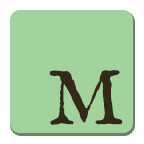
<style>
.page{position:relative;width:144px;height:144px;background:#a3d39c}
.page>*{position:absolute;margin:0}
.t1{font:82.4px "IM_FELL_English_PRO_Roman";color:#332919}
</style>
<div class="page">
<p class="t1" style="left:49px;top:70px;width:74px;height:55px">M</p>
</div>
